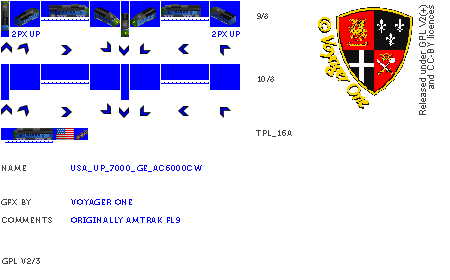
<style>
.page{position:relative;width:450px;height:280px;background:#ffffff}
.page>*{position:absolute;margin:0}
.t1{font:8px "Museo700-Regular";color:#404040}
.t2{font:8px "Museo700-Regular";color:#0000ff;text-transform:uppercase}
.t3{font:8px "Museo700-Regular";letter-spacing:0.075em;color:#404040}
.t4{font:8px "Museo700-Regular";letter-spacing:0.075em;color:#404040;text-transform:uppercase}
.t5{font:8px "Museo700-Regular";letter-spacing:0.075em;color:#0000ff;text-transform:uppercase}
</style>
<div class="page">
<p class="t1" style="left:257px;top:13px;width:11px;height:6px">9/8</p>
<p class="t2" style="left:12px;top:31px;width:28px;height:6px">2px up</p>
<p class="t2" style="left:212px;top:31px;width:28px;height:6px">2px up</p>
<p class="t3" style="left:258px;top:76px;width:16px;height:6px">10/8</p>
<p class="t4" style="left:256px;top:130px;width:36px;height:7px">tpl_16a</p>
<p class="t4" style="left:2px;top:165px;width:24px;height:6px">name</p>
<p class="t5" style="left:71px;top:165px;width:131px;height:7px">USA_UP_7000_GE_AC6000CW</p>
<p class="t4" style="left:1px;top:199px;width:30px;height:6px">gfx by</p>
<p class="t5" style="left:71px;top:199px;width:61px;height:6px">voyager one</p>
<p class="t4" style="left:2px;top:217px;width:50px;height:6px">comments</p>
<p class="t5" style="left:71px;top:217px;width:109px;height:6px">originally amtrak fl9</p>
<p class="t4" style="left:2px;top:258px;width:38px;height:6px">gpl v2/3</p>
</div>
